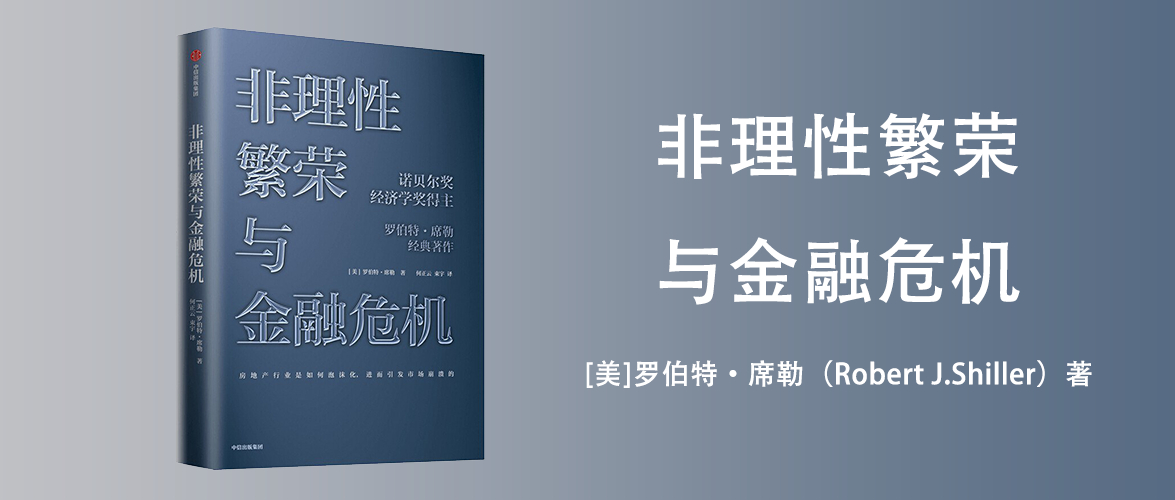
<style>
.page{position:relative;width:1175px;height:500px}
.page>*{position:absolute;margin:0}
.t1{font:72px "AdobeHeitiStd-Regular";color:#ffffff;font-weight:bold}
.t2{font:28px "AdobeHeitiStd-Regular";color:#ffffff;font-weight:bold}
</style>
<div class="page">
<p class="t1" style="left:658px;top:111px;width:362px;height:194px">非理性繁荣<br>与金融危机</p>
<p class="t2" style="left:586px;top:360px;width:506px;height:28px">[美]罗伯特·席勒（Robert J.Shiller）著</p>
</div>
